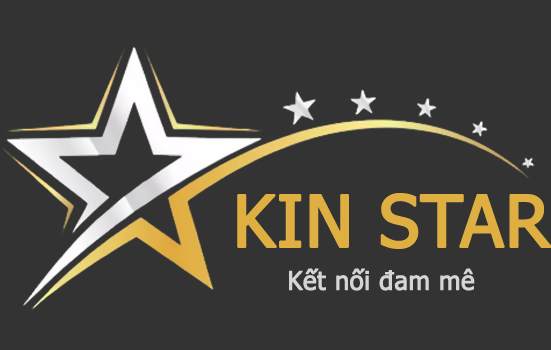
<style>
.page{position:relative;width:551px;height:350px;background:#333333}
.page>*{position:absolute;margin:0}
.t1{font:71.4px "Tahoma";color:#e0af42;font-weight:bold}
.t2{font:25.4px "Tahoma";color:#d5d5d7;font-weight:bold}
</style>
<div class="page">
<p class="t1" style="left:237px;top:193px;width:315px;height:56px">KIN STAR</p>
<p class="t2" style="left:289px;top:268px;width:186px;height:23px">Kết nối đam mê</p>
</div>
